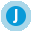
<style>
.page{position:relative;width:32px;height:32px;background:#aad7e9}
.page>*{position:absolute;margin:0}
.t1{font:19px "BebasNeue";color:#ffffff}
</style>
<div class="page">
<p class="t1" style="left:13px;top:9px;width:5px;height:14px">J</p>
</div>
